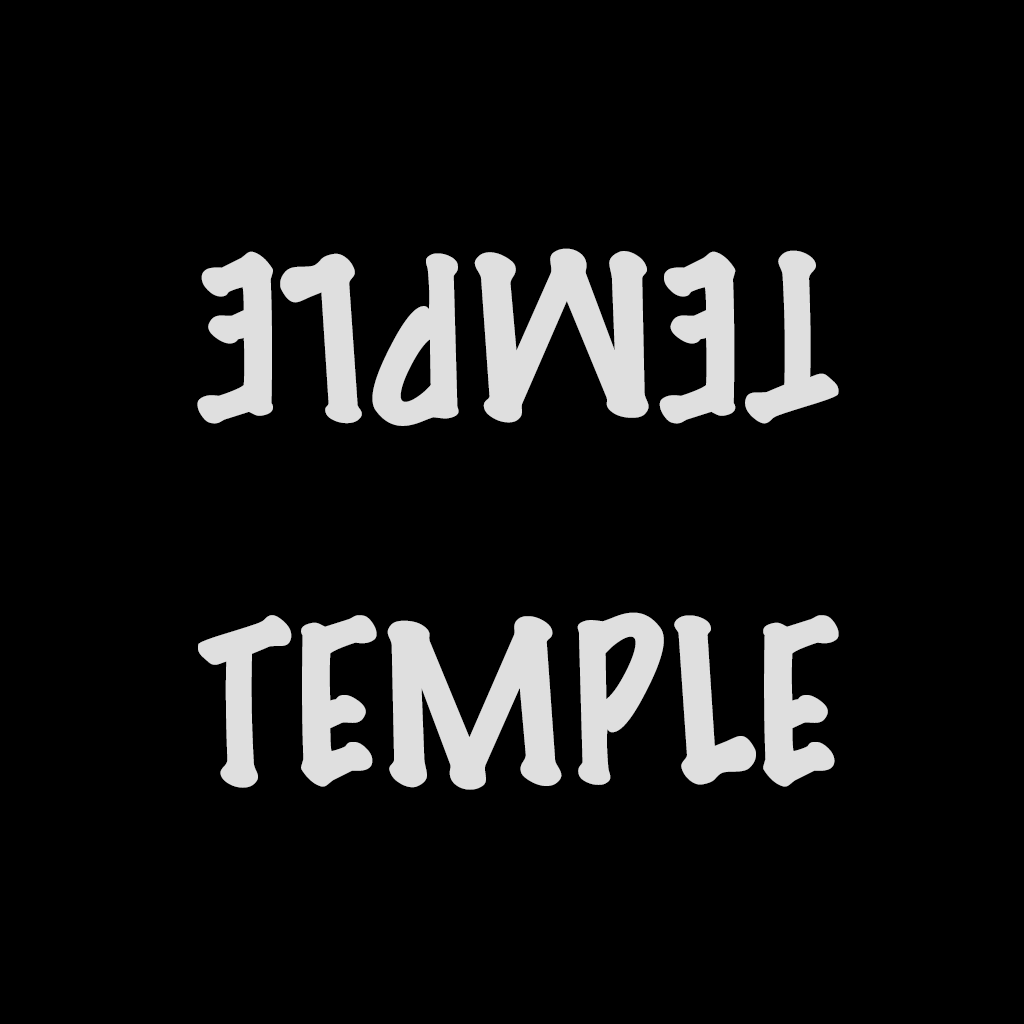
<style>
.page{position:relative;width:1024px;height:1024px;background:#000000}
.page>*{position:absolute;margin:0}
.t1{font:200.3px "MarkerFelt-Thin";color:#dfdfdf}
.t2{font:200px "MarkerFelt-Thin";color:#dfdfdf}
</style>
<div class="page">
<p class="t1" style="left:197px;top:248px;width:642px;height:178px;rotate:-180deg">TEMPLE</p>
<p class="t2" style="left:198px;top:612px;width:641px;height:178px">TEMPLE</p>
</div>
